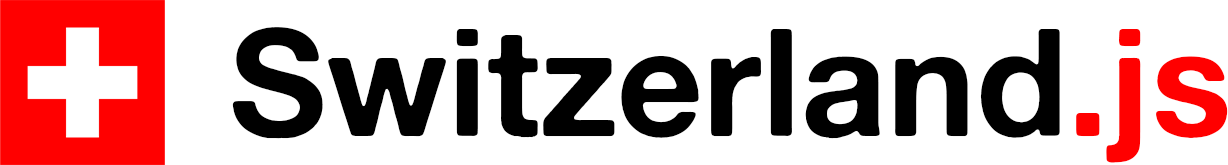
<style>
.page{position:relative;width:1228px;height:165px;background:#ffffff}
.page>*{position:absolute;margin:0}
.t1{font:150px "AlteHaasGrotesk_Bold";color:#000000}
.t2{font:150px "AlteHaasGrotesk_Bold";color:#ff0000}
</style>
<div class="page">
<p class="t1" style="left:232px;top:27px;width:996px;height:136px">Switzerland<span class="t2">.js</span></p>
</div>
